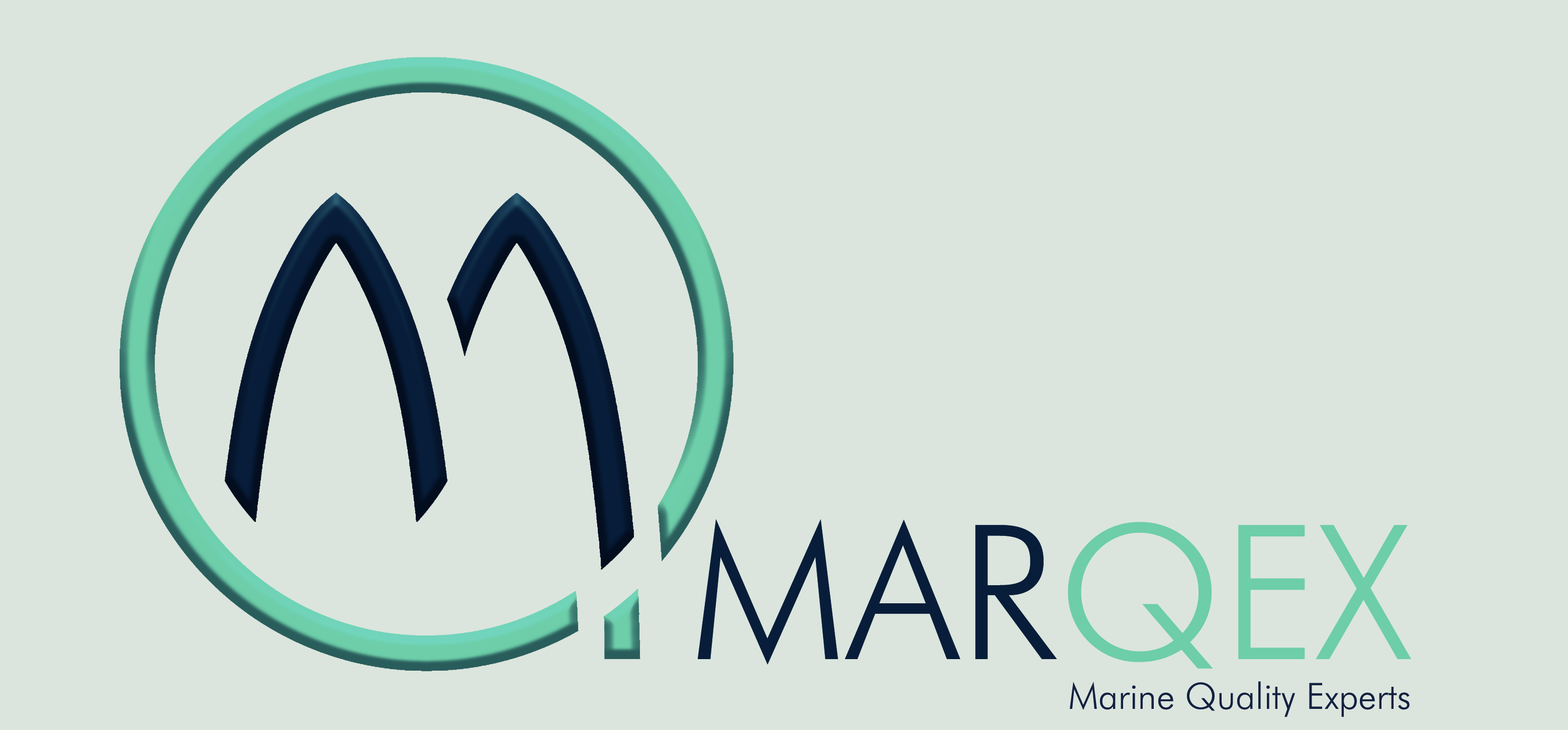
<style>
.page{position:relative;width:1568px;height:730px;background:#dbe5dd}
.page>*{position:absolute;margin:0}
.t1{font:187.5px "FuturaBT-Light";color:#071d39}
.t2{font:187.5px "FuturaBT-Light";color:#6dcea9}
.t3{font:36.2px "FuturaBT-Light";color:#13203f}
</style>
<div class="page">
<p class="t1" style="left:698px;top:519px;width:713px;height:150px">MAR<span class="t2">QEX</span></p>
<p class="t3" style="left:1070px;top:681px;width:340px;height:36px">Marine Quality Experts</p>
</div>
